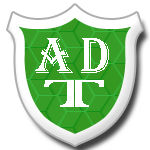
<style>
.page{position:relative;width:150px;height:150px;background:#ffffff}
.page>*{position:absolute;margin:0}
.t1{font:52px "Algerian";letter-spacing:0.1em;color:#ffffff}
.t2{font:49.8px "ColonnaMT";color:#ffffff;font-weight:bold;scale:1.93 1}
</style>
<div class="page">
<p class="t1" style="left:35px;top:38px;width:74px;height:35px">AD</p>
<p class="t2" style="left:44px;top:80px;width:60px;height:27px">T</p>
</div>
